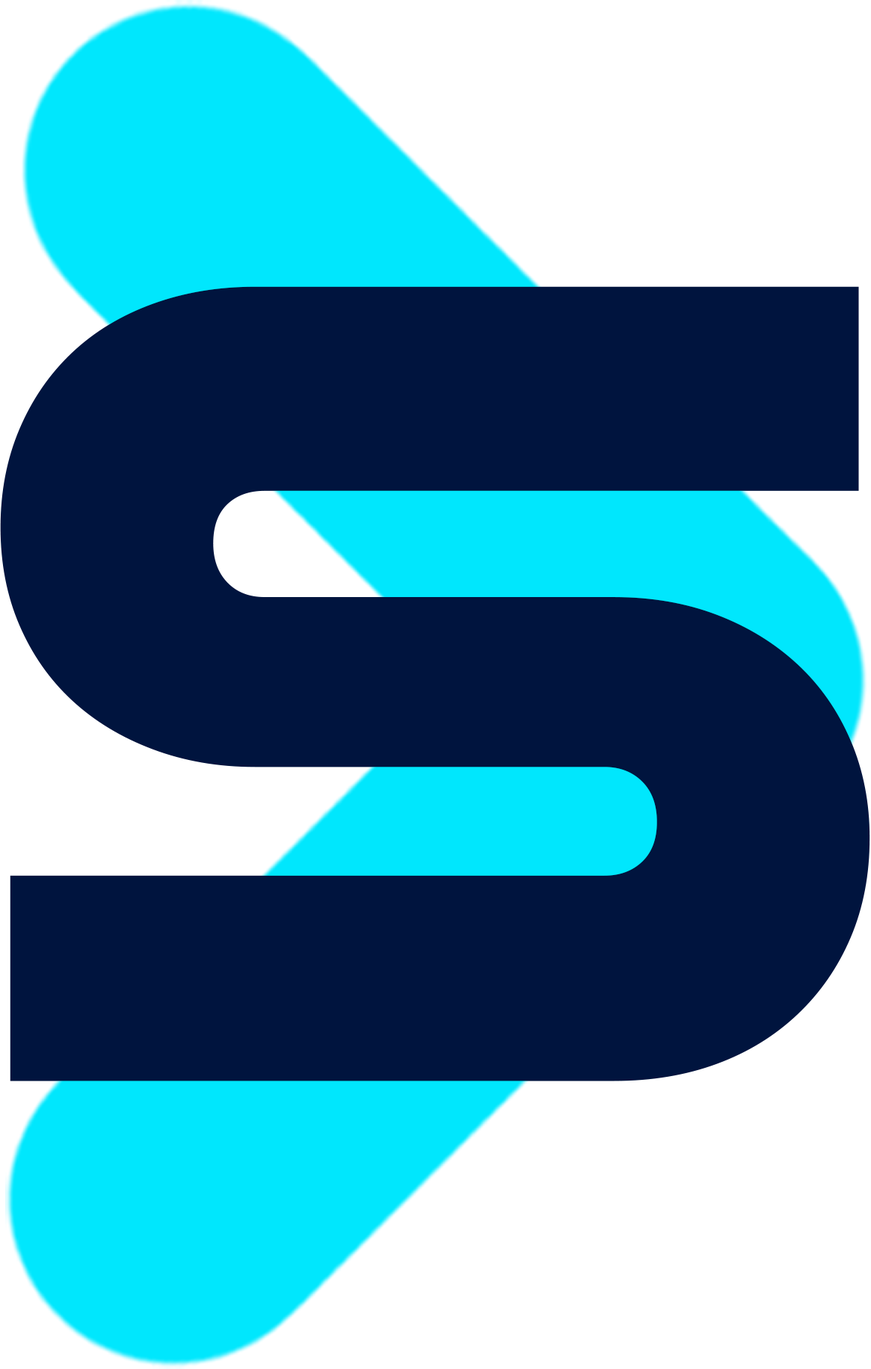
<style>
.page{position:relative;width:871px;height:1369px;background:#00143e}
.page>*{position:absolute;margin:0}
.t1{font:1222.3px "GoodTimingRg-Bold";letter-spacing:-0.025em;color:#00143e}
</style>
<div class="page">
<p class="t1" style="left:0px;top:286px;width:870px;height:796px">S</p>
</div>
